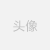
<style>
.page{position:relative;width:50px;height:50px;background:#f2f2f2}
.page>*{position:absolute;margin:0}
.t1{font:12px "MicrosoftYaHei";letter-spacing:0.05em;color:#c2c2c2}
</style>
<div class="page">
<p class="t1" style="left:13px;top:20px;width:25px;height:12px">头像</p>
</div>
